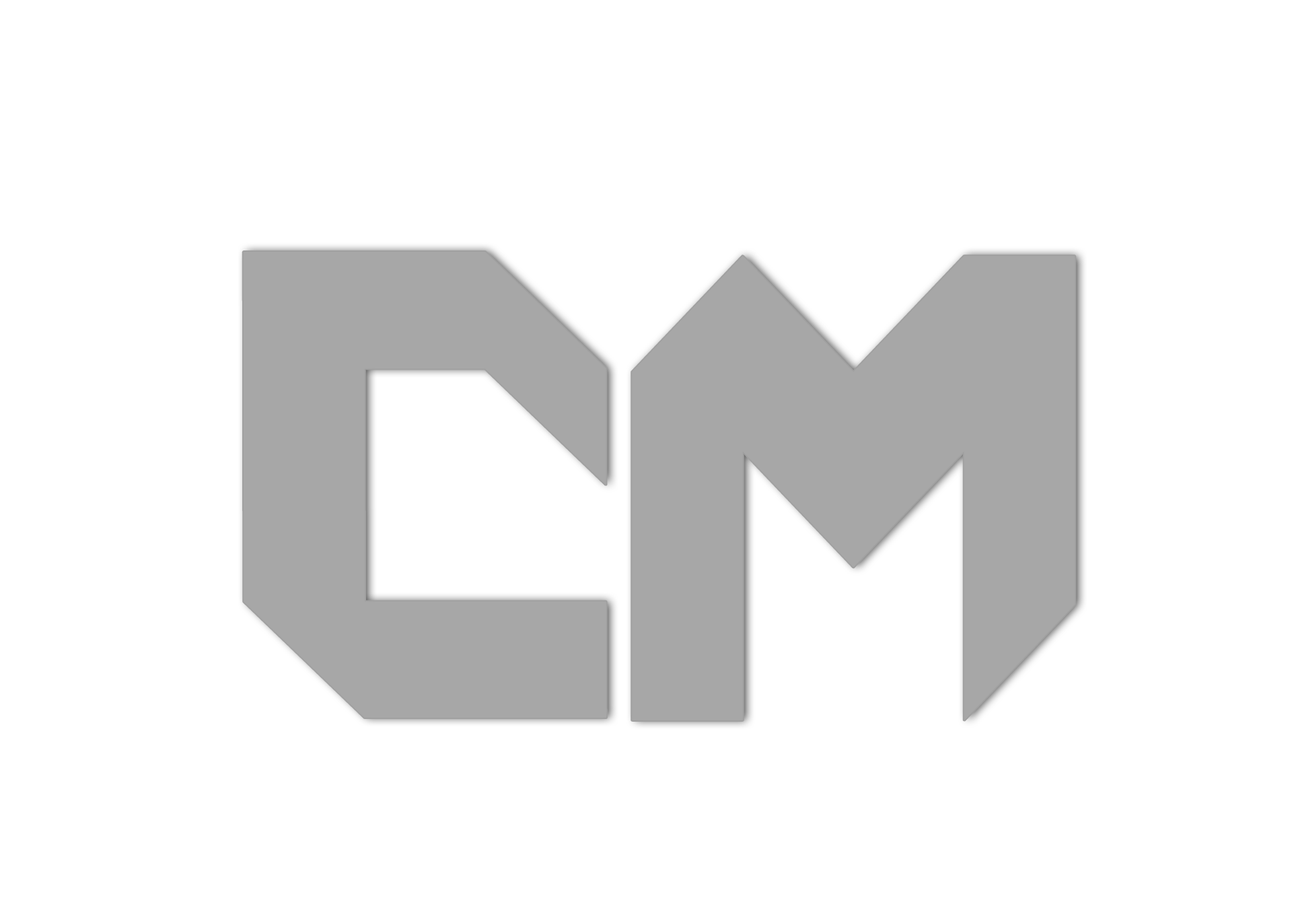
<style>
.page{position:relative;width:1292px;height:923px;background:#ffffff}
.page>*{position:absolute;margin:0}
.t1{font:667.1px "Agero";color:#a7a7a7;scale:1.08 1}
.t2{font:663px "Agero";color:#a7a7a7;scale:0.95 1}
</style>
<div class="page">
<p class="t1" style="left:243px;top:252px;width:363px;height:465px">C</p>
<p class="t2" style="left:632px;top:256px;width:444px;height:464px">M</p>
</div>
